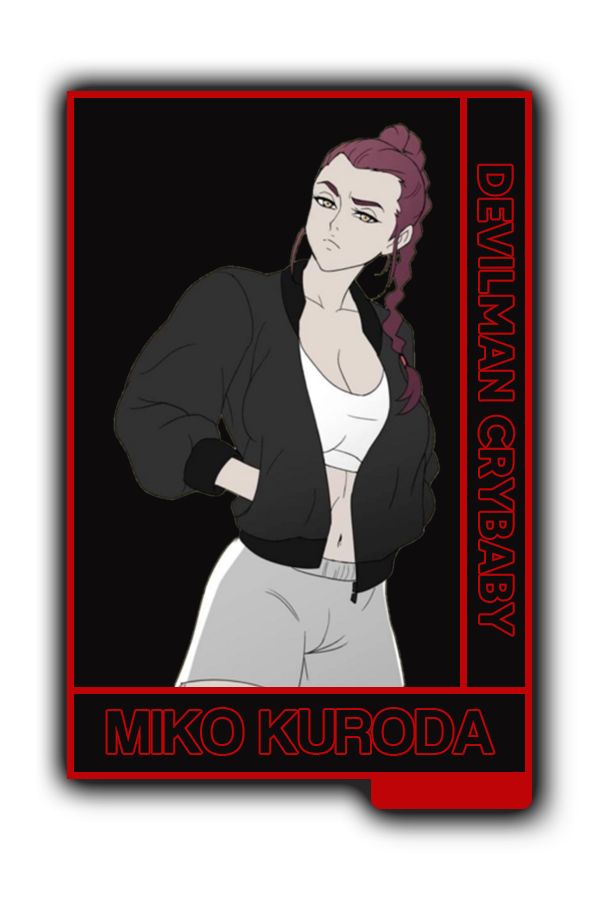
<style>
.page{position:relative;width:600px;height:900px;background:#0d0b0b}
.page>*{position:absolute;margin:0}
.t1{font:46.8px "MADETOMMY-Bold";color:#0d0b0b}
.t2{font:63.8px "CoolveticaRg-Regular";color:#0d0b0b}
</style>
<div class="page">
<p class="t1" style="left:479px;top:165px;width:35px;height:470px;rotate:90deg">DEVILMAN CRYBABY</p>
<p class="t2" style="left:107px;top:709px;width:387px;height:45px">MIKO KURODA</p>
</div>
